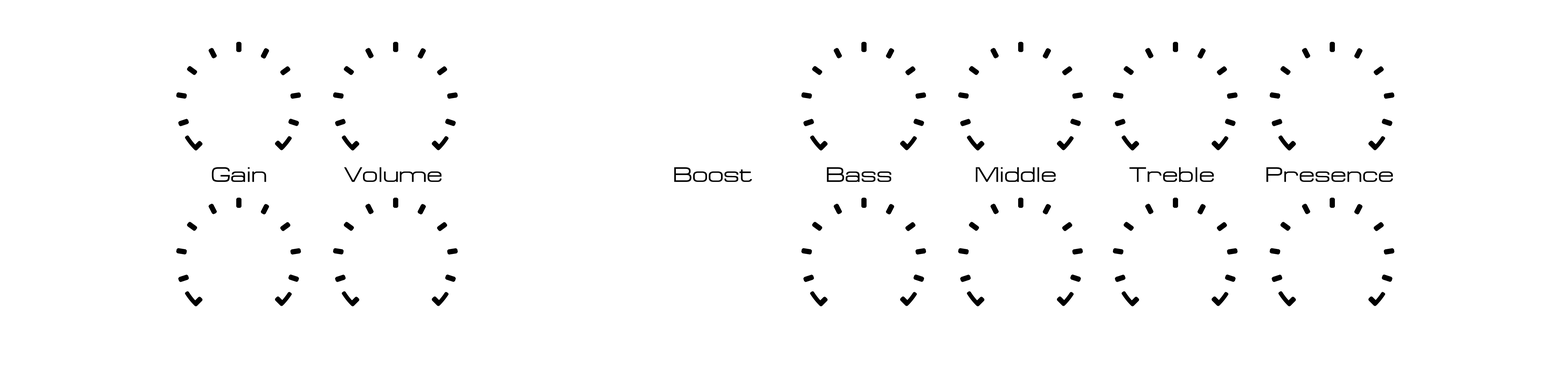
<style>
.page{position:relative;width:1568px;height:366px;background:#ffffff}
.page>*{position:absolute;margin:0}
.t1{font:20.9px "Federation";color:#010101}
</style>
<div class="page">
<p class="t1" style="left:212px;top:167px;width:1181px;height:15px">Gain       Volume                     Boost       Bass       Middle         Treble    Presence</p>
</div>
